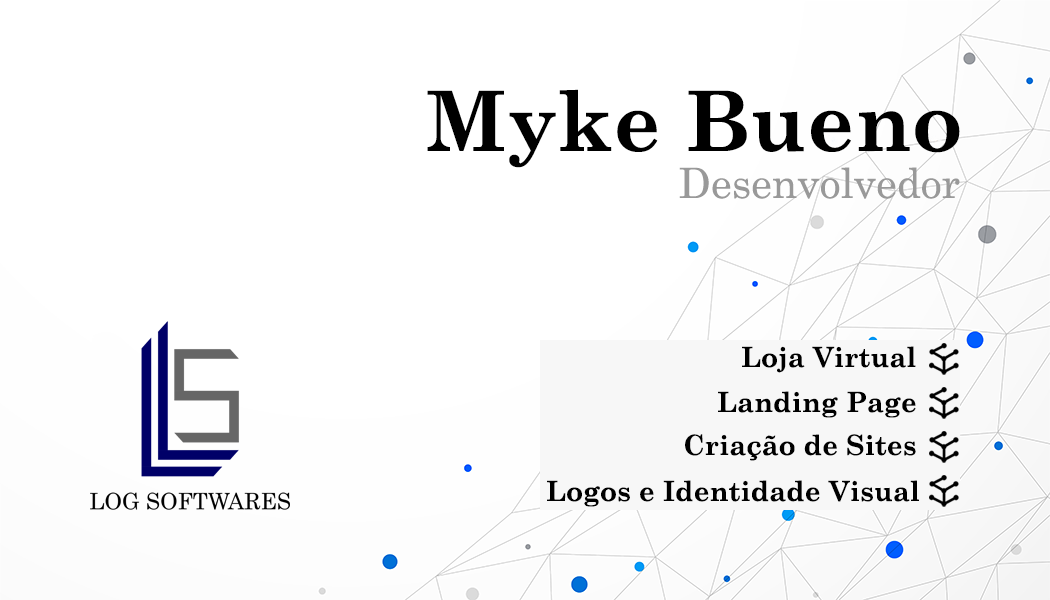
<style>
.page{position:relative;width:1050px;height:600px;background:#ffffff}
.page>*{position:absolute;margin:0}
.t1{font:83.3px "CenturySchoolbook-Bold";color:#000000}
.t2{font:41.7px "CenturySchoolbook";color:#999999}
.t3{font:27.8px "CenturySchoolbook-Bold";color:#000000}
</style>
<div class="page">
<p class="t1" style="left:427px;top:89px;width:533px;height:79px">Myke Bueno</p>
<p class="t2" style="left:679px;top:167px;width:281px;height:32px">Desenvolvedor</p>
<p class="t3" style="left:742px;top:346px;width:174px;height:27px">Loja Virtual</p>
<p class="t3" style="left:718px;top:391px;width:198px;height:27px">Landing Page</p>
<p class="t3" style="left:685px;top:434px;width:231px;height:27px">Criação de Sites</p>
<p class="t3" style="left:547px;top:480px;width:372px;height:27px">Logos e Identidade Visual</p>
</div>
